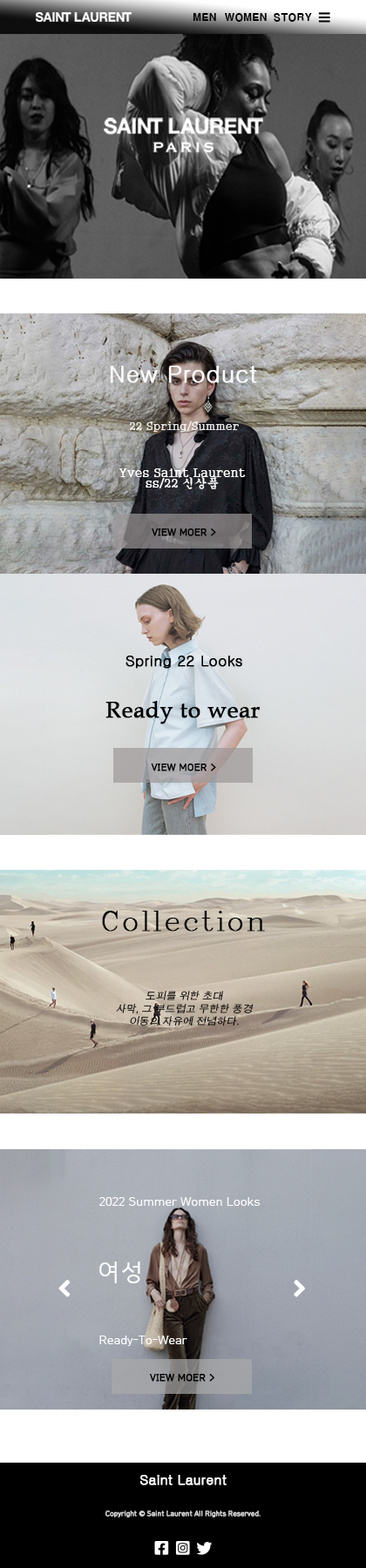
<style>
.page{position:relative;width:366px;height:1568px}
.page>*{position:absolute;margin:0}
.t1{font:10.1px "H2gtrE";color:#000000}
.t2{font:23.6px "Gulim";color:#fefefe;font-weight:bold}
.t3{font:11.3px "Gungsuh";color:#e7e6e6}
.t4{font:12.2px/9.8px "Gungsuh";color:#ffffff}
.t5{font:9.5px "HCRDotum";color:#000000;font-weight:bold}
.t6{font:14.7px "Gulim";color:#000000;font-weight:bold}
.t7{font:22.9px "BookAntiqua";color:#000000;font-weight:bold}
.t8{font:9.6px "HCRDotum";color:#000000;font-weight:bold}
.t9{font:26.1px "Complex";color:#000000;font-weight:bold}
.t10{font:10.1px/12.6px "ArialUnicodeMS";color:#000000;font-style:italic}
.t11{font:11.8px "HCRDotum";color:#fefefe}
.t12{font:23.5px "HCRDotum";color:#fefefe}
.t13{font:13.4px "Gulim";color:#ffffff;font-weight:bold}
.t14{font:6.7px "HCRDotum";color:#d4d4d4;font-weight:bold}
</style>
<div class="page">
<p class="t1" style="left:192px;top:12px;width:24px;height:10px">MEN</p>
<p class="t1" style="left:225px;top:12px;width:41px;height:10px">WOMEN</p>
<p class="t1" style="left:273px;top:12px;width:39px;height:10px">STORY</p>
<p class="t2" style="left:110px;top:366px;width:147px;height:17px">New Product</p>
<p class="t3" style="left:130px;top:421px;width:109px;height:11px">22 Spring/Summer</p>
<p class="t4" style="left:118px;top:468px;width:128px;height:21px;text-align:center">Yves Saint Laurent<br>ss/22 신상품</p>
<p class="t5" style="left:151px;top:528px;width:65px;height:8px">VIEW MOER &gt;</p>
<p class="t6" style="left:125px;top:656px;width:117px;height:13px">Spring 22 Looks</p>
<p class="t7" style="left:105px;top:701px;width:154px;height:23px">Ready to wear</p>
<p class="t8" style="left:151px;top:764px;width:65px;height:7px">VIEW MOER &gt;</p>
<p class="t9" style="left:102px;top:911px;width:163px;height:21px">Collection</p>
<p class="t10" style="left:116px;top:991px;width:137px;height:35px;text-align:center">도피를 위한 초대<br>사막, 그 부드럽고 무한한 풍경<br>이동의 자유에 전념하다.</p>
<p class="t11" style="left:99px;top:1197px;width:160px;height:9px">2022 Summer Women Looks</p>
<p class="t12" style="left:99px;top:1262px;width:41px;height:21px">여성</p>
<p class="t11" style="left:99px;top:1336px;width:88px;height:10px">Ready-To-Wear</p>
<p class="t5" style="left:150px;top:1374px;width:65px;height:8px">VIEW MOER &gt;</p>
<p class="t13" style="left:140px;top:1475px;width:86px;height:10px">Saint Laurent</p>
<p class="t14" style="left:105px;top:1511px;width:155px;height:7px">Copyright © Saint Laurent All Rights Reserved.</p>
</div>
